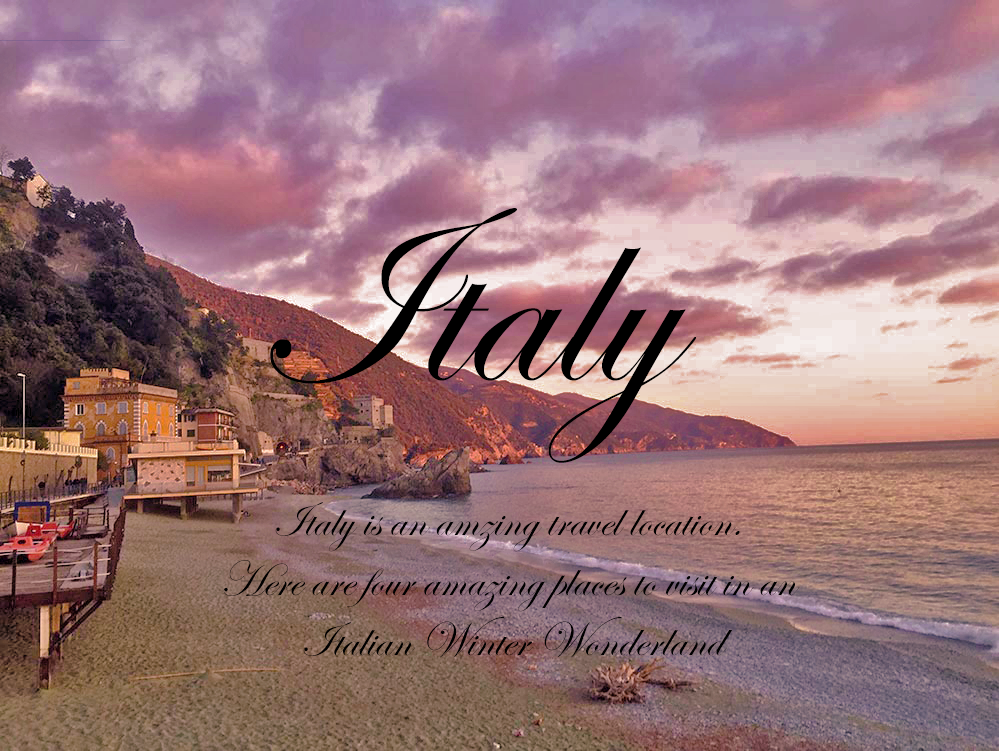
<style>
.page{position:relative;width:999px;height:751px}
.page>*{position:absolute;margin:0}
.t1{font:260px "EdwardianScriptITC";color:#000000}
.t2{font:50px "EdwardianScriptITC";color:#000000}
</style>
<div class="page">
<p class="t1" style="left:270px;top:208px;width:426px;height:255px">Italy</p>
<p class="t2" style="left:223px;top:502px;width:577px;height:156px;text-align:center">Italy is an amzing travel location. <br>Here are four amazing places to visit in an <br>Italian Winter Wonderland</p>
</div>
